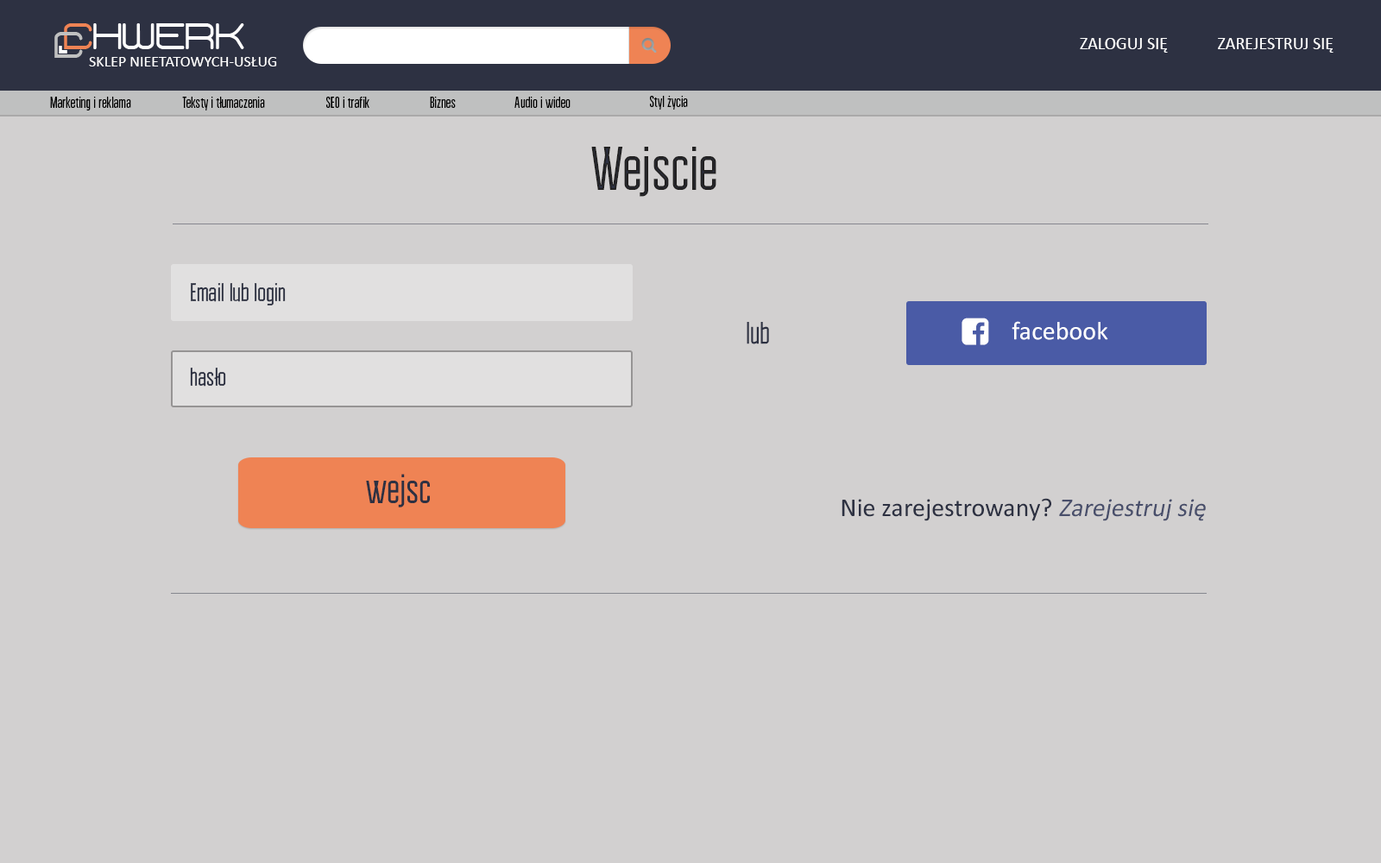
<style>
.page{position:relative;width:1381px;height:863px;background:#d2d0d0}
.page>*{position:absolute;margin:0}
.t1{font:34.2px "Phantomcyr-lat";color:#bfc0c0}
.t2{font:17.3px "Calibri";color:#ffffff}
.t3{font:15.5px "Calibri";color:#ffffff}
.t4{font:15.5px "BravoRG";color:#000000}
.t5{font:62.2px "BravoRG";color:#222121}
.t6{font:25.9px "BravoRG";color:#2d3142}
.t7{font:31.1px "BravoRG";color:#2d3142}
.t8{font:25.9px "Calibri";color:#ffffff}
.t9{font:41.4px "BravoRG";color:#2d3142}
.t10{font:25.9px "Calibri";color:#2d3142}
.t11{font:25.9px "Calibri";color:#494f6b;font-style:italic}
</style>
<div class="page">
<p class="t1" style="left:54px;top:32px;width:29px;height:26px">C</p>
<p class="t2" style="left:1080px;top:38px;width:88px;height:15px">ZALOGUJ SIĘ</p>
<p class="t2" style="left:1218px;top:38px;width:116px;height:15px">ZAREJESTRUJ SIĘ</p>
<p class="t3" style="left:89px;top:57px;width:188px;height:9px">SKLEP NIEETATOWYCH-USŁUG</p>
<p class="t4" style="left:50px;top:97px;width:81px;height:14px">Marketing i reklama</p>
<p class="t4" style="left:182px;top:97px;width:83px;height:14px">Teksty i tłumaczenia</p>
<p class="t4" style="left:326px;top:97px;width:43px;height:11px">SEO i trafik</p>
<p class="t4" style="left:430px;top:97px;width:26px;height:11px">Biznes</p>
<p class="t4" style="left:515px;top:97px;width:56px;height:11px">Audio i wideo</p>
<p class="t4" style="left:650px;top:96px;width:38px;height:14px">Styl życia</p>
<p class="t5" style="left:591px;top:147px;width:126px;height:50px">Wejscie</p>
<p class="t6" style="left:191px;top:283px;width:95px;height:23px">Email lub login</p>
<p class="t7" style="left:747px;top:322px;width:22px;height:22px">lub</p>
<p class="t8" style="left:1012px;top:321px;width:96px;height:19px">facebook</p>
<p class="t6" style="left:190px;top:368px;width:36px;height:19px">hasło</p>
<p class="t9" style="left:366px;top:474px;width:64px;height:34px">wejsc</p>
<p class="t10" style="left:842px;top:498px;width:364px;height:23px">Nie zarejestrowany? <span class="t11">Zarejestruj się</span></p>
</div>
